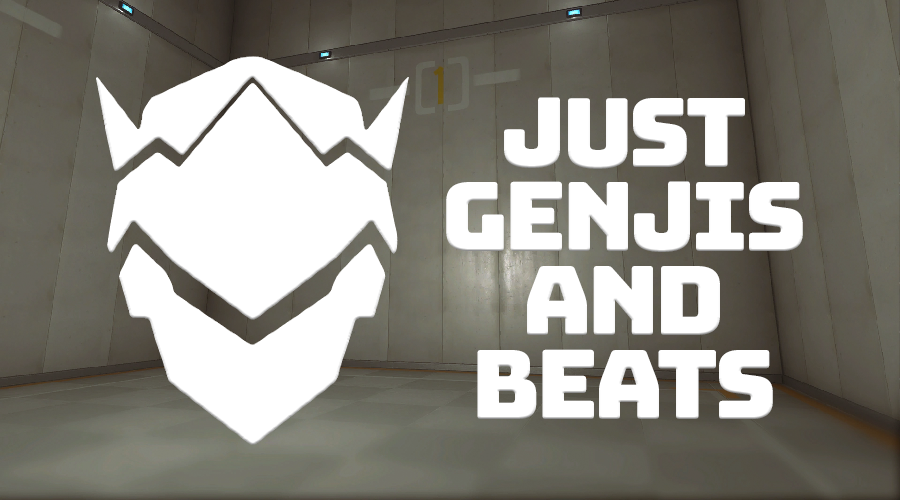
<style>
.page{position:relative;width:900px;height:500px;background:#ffffff}
.page>*{position:absolute;margin:0}
.t1{font:96px/84px "Bungee-Regular";letter-spacing:-0.05em;color:#ffffff}
</style>
<div class="page">
<p class="t1" style="left:446px;top:97px;width:357px;height:322px;text-align:center">Just<br>Genjis<br>and<br>Beats</p>
</div>
